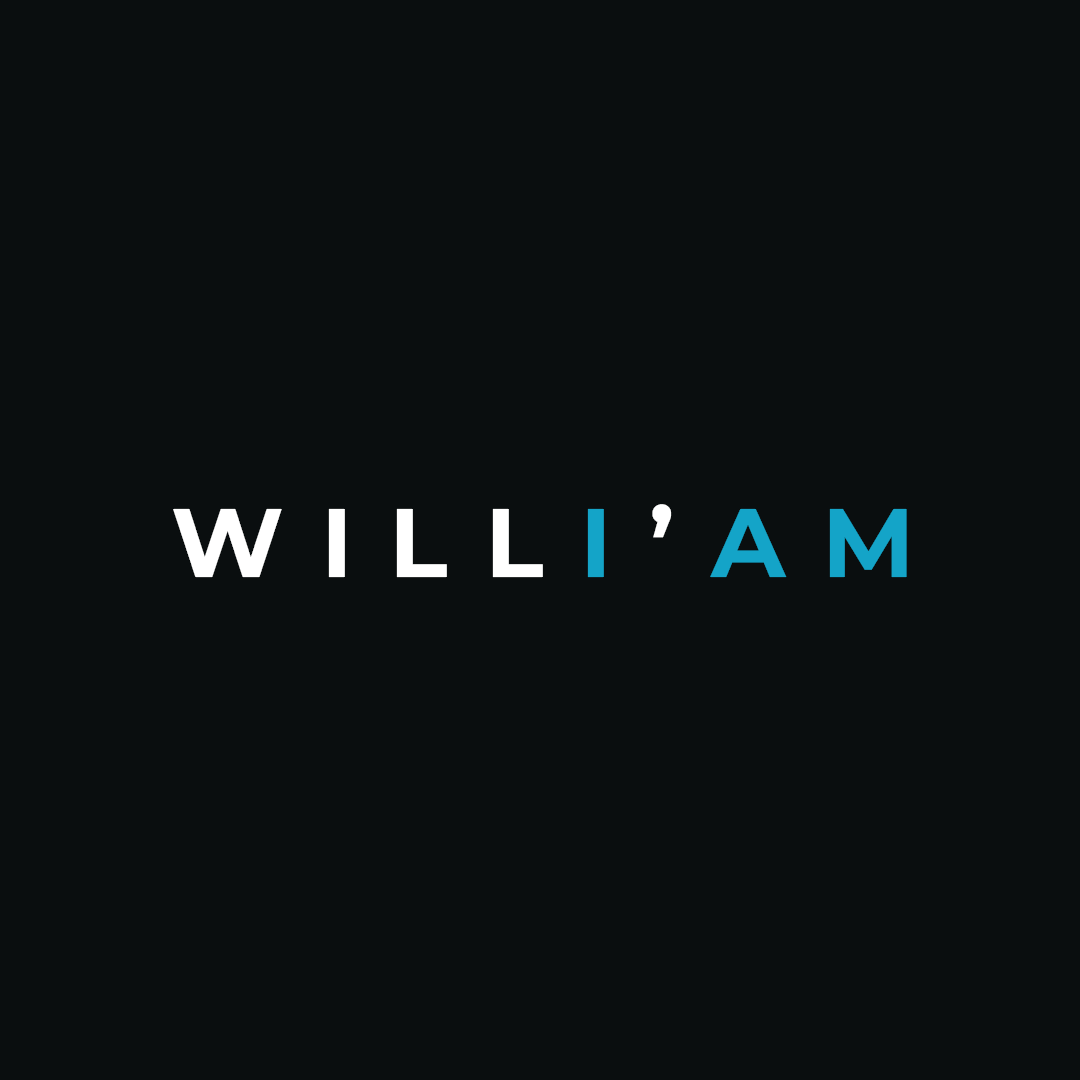
<style>
.page{position:relative;width:1080px;height:1080px;background:#0a0e0f}
.page>*{position:absolute;margin:0}
.t1{font:97px "MontserratRoman-Bold";letter-spacing:0.38em;color:#ffffff}
.t2{font:97px "MontserratRoman-Bold";letter-spacing:0.38em;color:#14a4c8}
</style>
<div class="page">
<p class="t1" style="left:173px;top:504px;width:734px;height:74px">WILL<span class="t2">I</span>’<span class="t2">AM</span></p>
</div>
